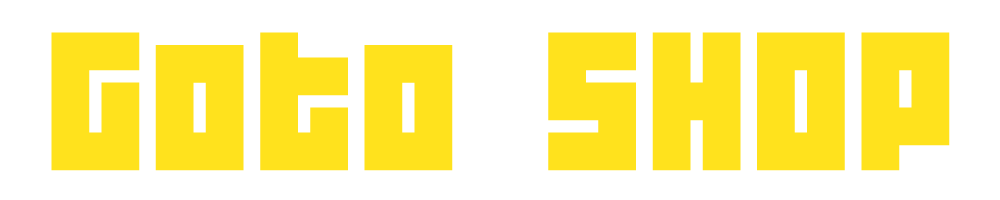
<style>
.page{position:relative;width:1000px;height:200px;background:#ffffff}
.page>*{position:absolute;margin:0}
.t1{font:175px "04b19";letter-spacing:0.025em;color:#ffe21d}
</style>
<div class="page">
<p class="t1" style="left:51px;top:32px;width:899px;height:139px">Goto SHOP</p>
</div>
